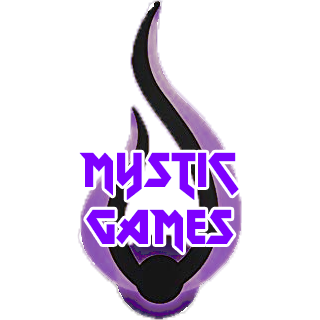
<style>
.page{position:relative;width:320px;height:320px;background:#ffffff}
.page>*{position:absolute;margin:0}
.t1{font:48px "MetalLord-Regular";color:#7e00ff}
</style>
<div class="page">
<p class="t1" style="left:79px;top:152px;width:160px;height:101px;text-align:center">Mystic<br>Games</p>
</div>
